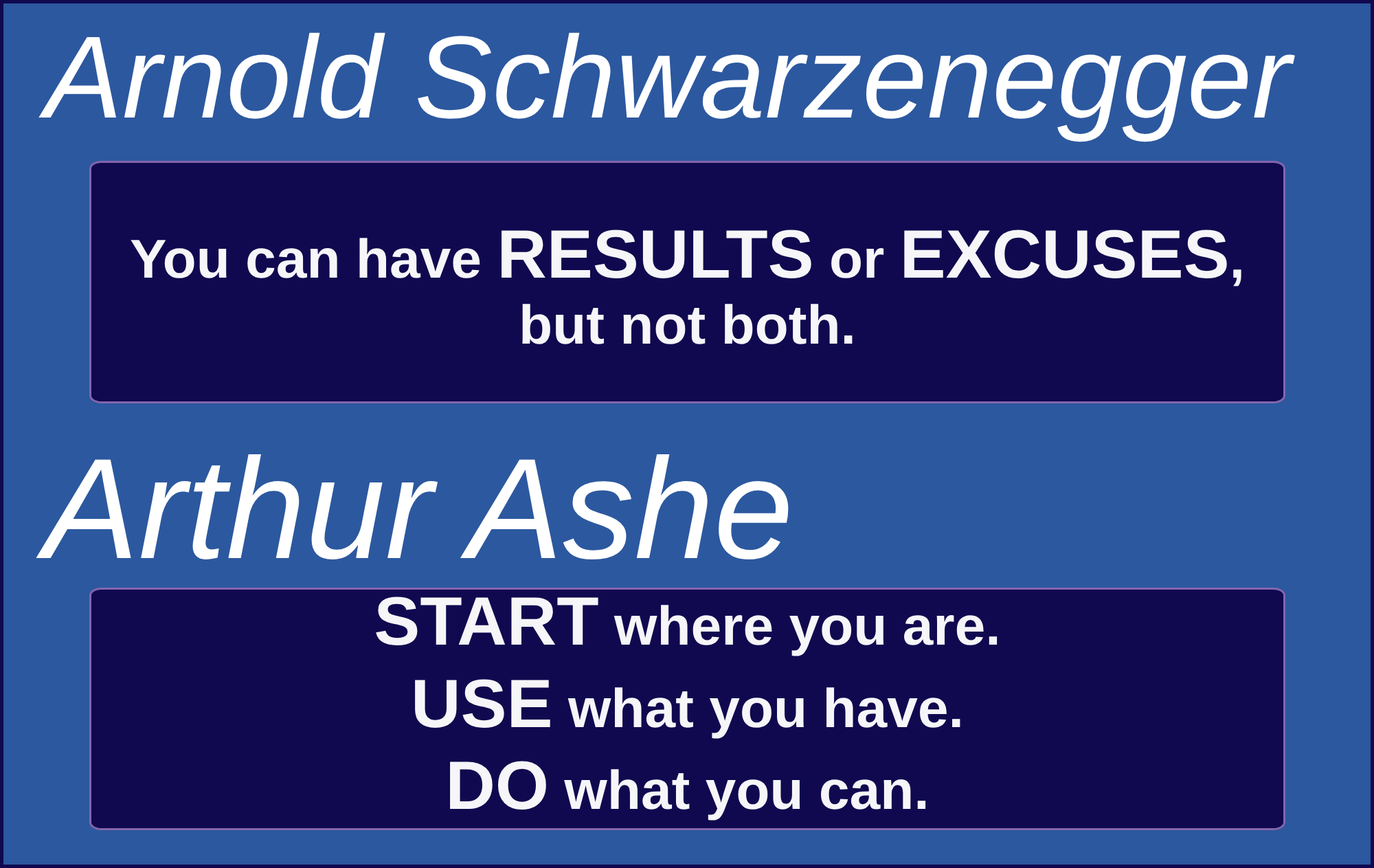
<style>
.page{position:relative;width:1374px;height:868px;background:#2c589f}
.page>*{position:absolute;margin:0}
.t1{font:116.8px "Arial-ItalicMT";color:#ffffff}
.t2{font:54.7px "Arial-BoldMT";color:#f6f6f9}
.t3{font:68.4px "Arial-BoldMT";color:#f6f6f9}
.t4{font:143.1px "Arial-ItalicMT";color:#ffffff}
</style>
<div class="page">
<p class="t1" style="left:38px;top:32px;width:1257px;height:110px">Arnold Schwarzenegger</p>
<p class="t2" style="left:131px;top:229px;width:1111px;height:115px;text-align:center">You can have <span class="t3">RESULTS </span>or <span class="t3">EXCUSES</span>,<br>but not both.</p>
<p class="t4" style="left:36px;top:454px;width:753px;height:105px">Arthur Ashe</p>
<p class="t2" style="left:376px;top:596px;width:622px;height:224px;text-align:center"><span class="t3">START </span>where you are.<br><span class="t3">USE </span>what you have.<br><span class="t3">DO </span>what you can.</p>
</div>
